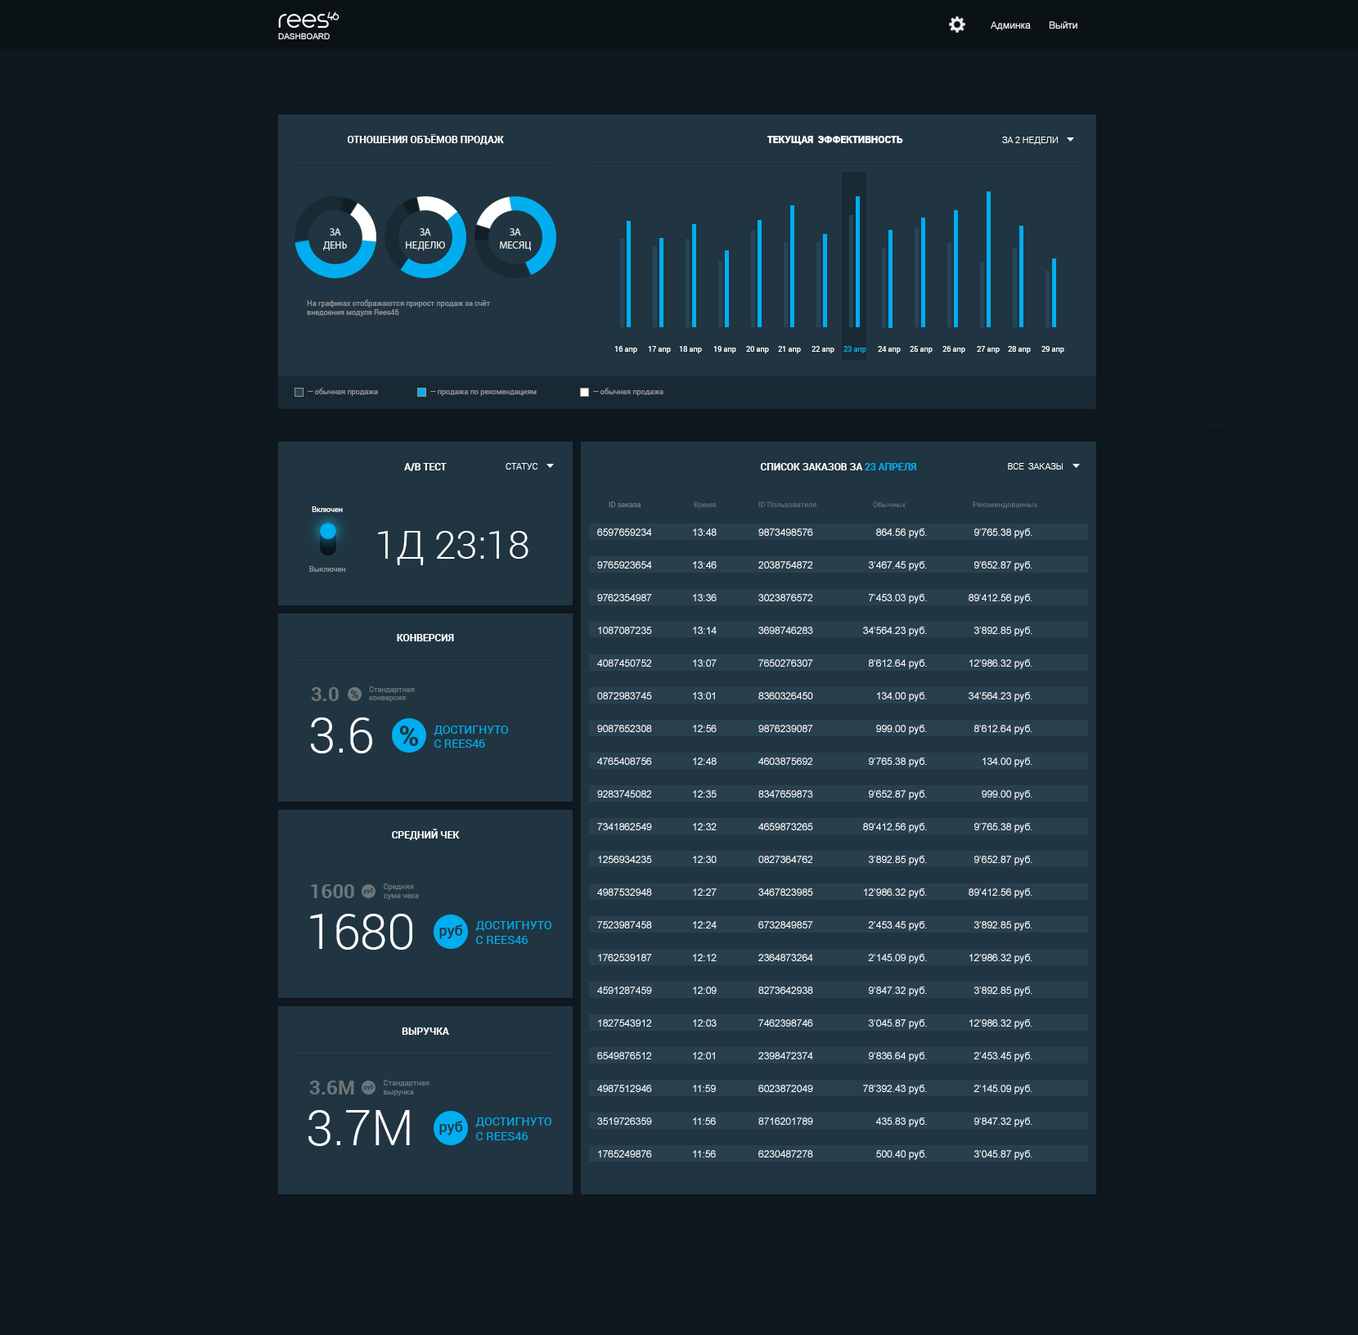
<style>
.page{position:relative;width:1358px;height:1335px;background:#0e181e}
.page>*{position:absolute;margin:0}
.t1{font:9.8px "ArialMT";color:#ffffff}
.t2{font:8.2px "ArialMT";color:#ffffff}
.t3{font:9.8px "Roboto-Bold";color:#ffffff}
.t4{font:9.8px "Roboto-Black";color:#ffffff}
.t5{font:9px "Roboto-Light";color:#ffffff}
.t6{font:10.4px/12.7px "MyriadPro-Regular";color:#dfe1e2}
.t7{font:7.4px "Roboto-Regular";color:#949494}
.t8{font:7.4px "Roboto-Regular";color:#ffffff}
.t9{font:7.4px "Roboto-Regular";color:#fefefe}
.t10{font:7.4px "Roboto-Regular";color:#00aeef}
.t11{font:9.8px "Roboto-Bold";color:#00aeef}
.t12{font:7.4px "Roboto-Regular";color:#6d767b}
.t13{font:39.3px "Roboto-Light";color:#ffffff}
.t14{font:9.8px/32.7px "ArialMT";color:#ffffff}
.t15{font:19.9px "Roboto-Bold";color:#6d767b}
.t16{font:7.4px/8.2px "Roboto-Regular";color:#6d767b}
.t17{font:49.1px "Roboto-Light";color:#ffffff}
.t18{font:11.5px "Roboto-Regular";color:#00aeef}
.t19{font:11.7px "Roboto-Regular";color:#00aeef}
</style>
<div class="page">
<p class="t1" style="left:991px;top:21px;width:40px;height:9px">Админка</p>
<p class="t1" style="left:1050px;top:21px;width:28px;height:8px">Выйти</p>
<p class="t2" style="left:278px;top:33px;width:52px;height:6px">DASHBOARD</p>
<p class="t3" style="left:347px;top:134px;width:157px;height:11px">ОТНОШЕНИЯ ОБЪЁМОВ ПРОДАЖ</p>
<p class="t4" style="left:767px;top:136px;width:136px;height:9px">ТЕКУЩАЯ  ЭФФЕКТИВНОСТЬ</p>
<p class="t5" style="left:1002px;top:137px;width:56px;height:8px">ЗА 2 НЕДЕЛИ</p>
<p class="t6" style="left:323px;top:228px;width:24px;height:23px;text-align:center">ЗА<br>ДЕНЬ</p>
<p class="t6" style="left:406px;top:228px;width:39px;height:23px;text-align:center">ЗА<br>НЕДЕЛЮ</p>
<p class="t6" style="left:500px;top:228px;width:31px;height:23px;text-align:center">ЗА<br>МЕСЯЦ</p>
<p class="t7" style="left:307px;top:299px;width:183px;height:18px">На графиках отображаются прирост продаж за счёт<br>внедоения модуля Rees46</p>
<p class="t8" style="left:614px;top:346px;width:23px;height:7px">16 апр</p>
<p class="t9" style="left:648px;top:346px;width:23px;height:7px">17 апр</p>
<p class="t9" style="left:679px;top:346px;width:23px;height:7px">18 апр</p>
<p class="t9" style="left:713px;top:346px;width:23px;height:7px">19 апр</p>
<p class="t9" style="left:746px;top:346px;width:23px;height:7px">20 апр</p>
<p class="t9" style="left:778px;top:346px;width:23px;height:7px">21 апр</p>
<p class="t9" style="left:812px;top:346px;width:23px;height:7px">22 апр</p>
<p class="t10" style="left:844px;top:346px;width:22px;height:7px">23 апр</p>
<p class="t8" style="left:878px;top:346px;width:23px;height:7px">24 апр</p>
<p class="t8" style="left:910px;top:346px;width:23px;height:7px">25 апр</p>
<p class="t8" style="left:943px;top:346px;width:22px;height:7px">26 апр</p>
<p class="t8" style="left:977px;top:346px;width:23px;height:7px">27 апр</p>
<p class="t8" style="left:1008px;top:346px;width:23px;height:7px">28 апр</p>
<p class="t8" style="left:1042px;top:346px;width:22px;height:7px">29 апр</p>
<p class="t7" style="left:308px;top:388px;width:70px;height:8px">— обычная продажа</p>
<p class="t7" style="left:593px;top:388px;width:71px;height:8px">— обычная продажа</p>
<p class="t7" style="left:430px;top:390px;width:107px;height:6px">— продажа по рекомендациям</p>
<p class="t3" style="left:404px;top:463px;width:43px;height:8px">A/B ТЕСТ</p>
<p class="t5" style="left:506px;top:463px;width:32px;height:7px">СТАТУС</p>
<p class="t3" style="left:760px;top:463px;width:156px;height:7px">СПИСОК ЗАКАЗОВ ЗА <span class="t11">23 АПРЕЛЯ</span></p>
<p class="t5" style="left:1008px;top:463px;width:55px;height:7px">ВСЕ  ЗАКАЗЫ</p>
<p class="t8" style="left:312px;top:506px;width:31px;height:6px">Включен</p>
<p class="t12" style="left:609px;top:502px;width:32px;height:5px">ID заказа</p>
<p class="t12" style="left:694px;top:502px;width:22px;height:7px">Время</p>
<p class="t12" style="left:758px;top:502px;width:59px;height:5px">ID Пользователя</p>
<p class="t12" style="left:873px;top:502px;width:33px;height:5px">Обычных</p>
<p class="t12" style="left:973px;top:502px;width:64px;height:7px">Рекомендованных</p>
<p class="t13" style="left:378px;top:531px;width:151px;height:34px">1Д 23:18</p>
<p class="t14" style="left:597px;top:529px;width:55px;height:629px">659765923497659236549762354987108708723540874507520872983745908765230847654087569283745082734186254912569342354987532948752398745817625391874591287459182754391265498765124987512946351972635917652498765214324</p>
<p class="t14" style="left:693px;top:529px;width:24px;height:629px">13:48<br>13:46<br>13:36<br>13:14<br>13:07<br>13:01<br>12:56<br>12:48<br>12:35<br>12:32<br>12:30<br>12:27<br>12:24<br>12:12<br>12:09<br>12:03<br>12:01<br>11:59<br>11:56<br>11:56</p>
<p class="t14" style="left:758px;top:529px;width:55px;height:629px">98734985762038754872302387657236987462837650276307836032645098762390874603875692834765987346598732650827364762346782398567328498572364873264827364293874623987462398472374602387204987162017896230487278</p>
<p class="t14" style="left:863px;top:529px;width:64px;height:631px;text-align:right">864.56 руб.<br>3’467.45 руб.<br>7’453.03 руб.<br>34’564.23 руб.<br>8’612.64 руб.<br>134.00 руб.<br>999.00 руб.<br>9’765.38 руб.<br>9’652.87 руб.<br>89’412.56 руб.<br>3’892.85 руб.<br>12’986.32 руб.<br>2’453.45 руб.<br>2’145.09 руб.<br>9’847.32 руб.<br>3’045.87 руб.<br>9’836.64 руб.<br>78’392.43 руб.<br>435.83 руб.<br>500.40 руб.</p>
<p class="t14" style="left:969px;top:529px;width:64px;height:631px;text-align:right">9’765.38 руб.<br>9’652.87 руб.<br>89’412.56 руб.<br>3’892.85 руб.<br>12’986.32 руб.<br>34’564.23 руб.<br>8’612.64 руб.<br>134.00 руб.<br>999.00 руб.<br>9’765.38 руб.<br>9’652.87 руб.<br>89’412.56 руб.<br>3’892.85 руб.<br>12’986.32 руб.<br>3’892.85 руб.<br>12’986.32 руб.<br>2’453.45 руб.<br>2’145.09 руб.<br>9’847.32 руб.<br>3’045.87 руб.<br>9’836.64 руб.<br>78’392.43 руб.<br>435.83 руб.<br>500.40 руб.</p>
<p class="t7" style="left:309px;top:566px;width:37px;height:6px">Выключен</p>
<p class="t3" style="left:397px;top:634px;width:57px;height:7px">КОНВЕРСИЯ</p>
<p class="t15" style="left:311px;top:687px;width:28px;height:14px">3.0</p>
<p class="t16" style="left:369px;top:686px;width:46px;height:16px">Стандартная<br>конверсия</p>
<p class="t17" style="left:311px;top:718px;width:61px;height:36px">3.6</p>
<p class="t18" style="left:434px;top:726px;width:74px;height:22px">ДОСТИГНУТО<br>С REES46</p>
<p class="t3" style="left:392px;top:829px;width:68px;height:11px">СРЕДНИЙ ЧЕК</p>
<p class="t15" style="left:311px;top:884px;width:43px;height:14px">1600</p>
<p class="t12" style="left:384px;top:884px;width:35px;height:16px">Средняя<br>сума чека</p>
<p class="t17" style="left:310px;top:914px;width:102px;height:36px">1680</p>
<p class="t19" style="left:475px;top:921px;width:76px;height:23px">ДОСТИГНУТО<br>С REES46</p>
<p class="t3" style="left:402px;top:1028px;width:47px;height:7px">ВЫРУЧКА</p>
<p class="t15" style="left:309px;top:1081px;width:45px;height:14px">3.6М</p>
<p class="t12" style="left:384px;top:1080px;width:46px;height:16px">Стандартная<br>выручка</p>
<p class="t17" style="left:308px;top:1110px;width:102px;height:36px">3.7М</p>
<p class="t19" style="left:475px;top:1118px;width:76px;height:23px">ДОСТИГНУТО<br>С REES46</p>
</div>
